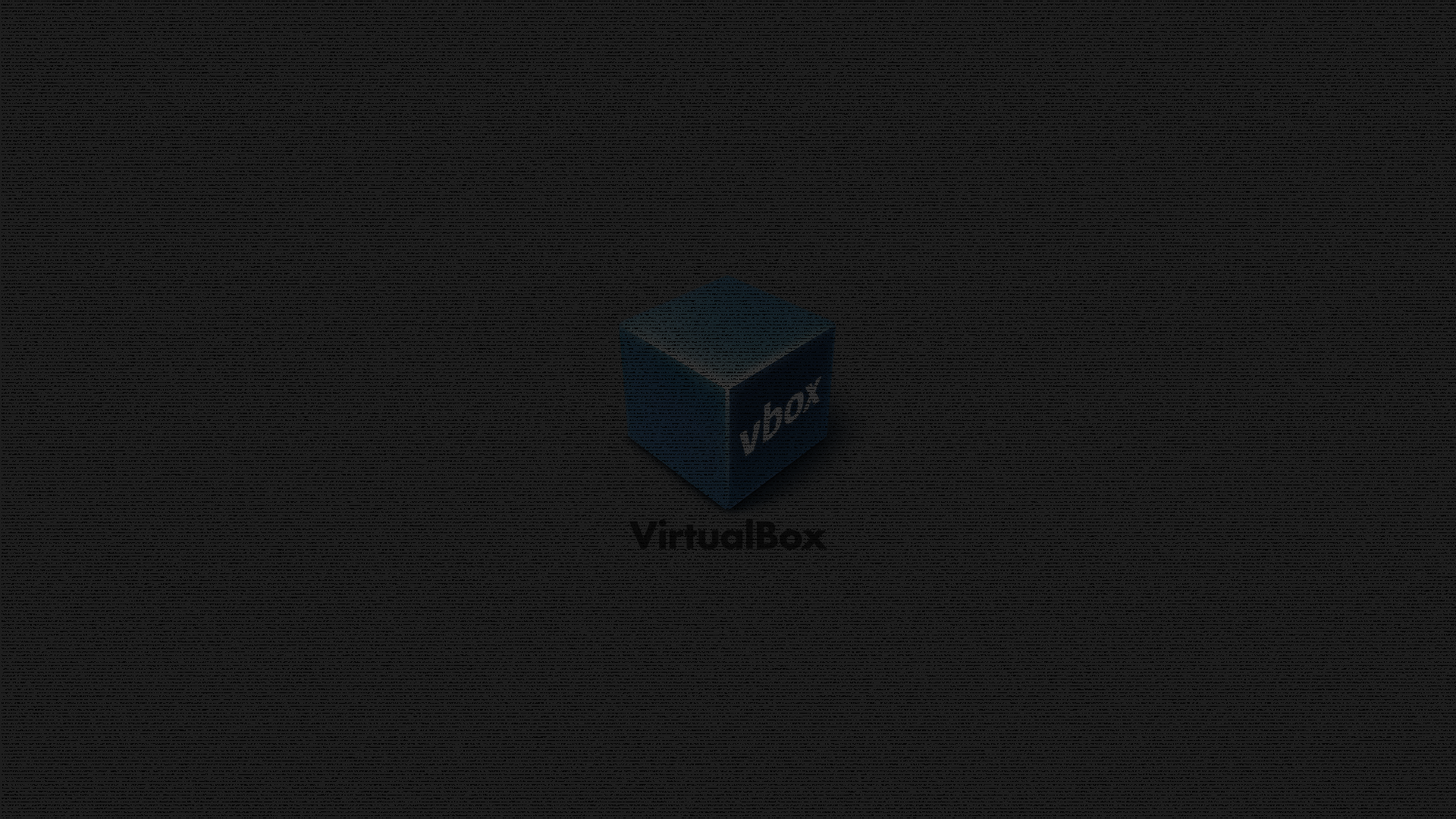
<style>
.page{position:relative;width:1456px;height:819px}
.page>*{position:absolute;margin:0}
.t1{font:36.4px "FuturaStd-Bold";color:#0a0a0a}
</style>
<div class="page">
<p class="t1" style="left:629px;top:519px;width:199px;height:31px">VirtualBox</p>
</div>
